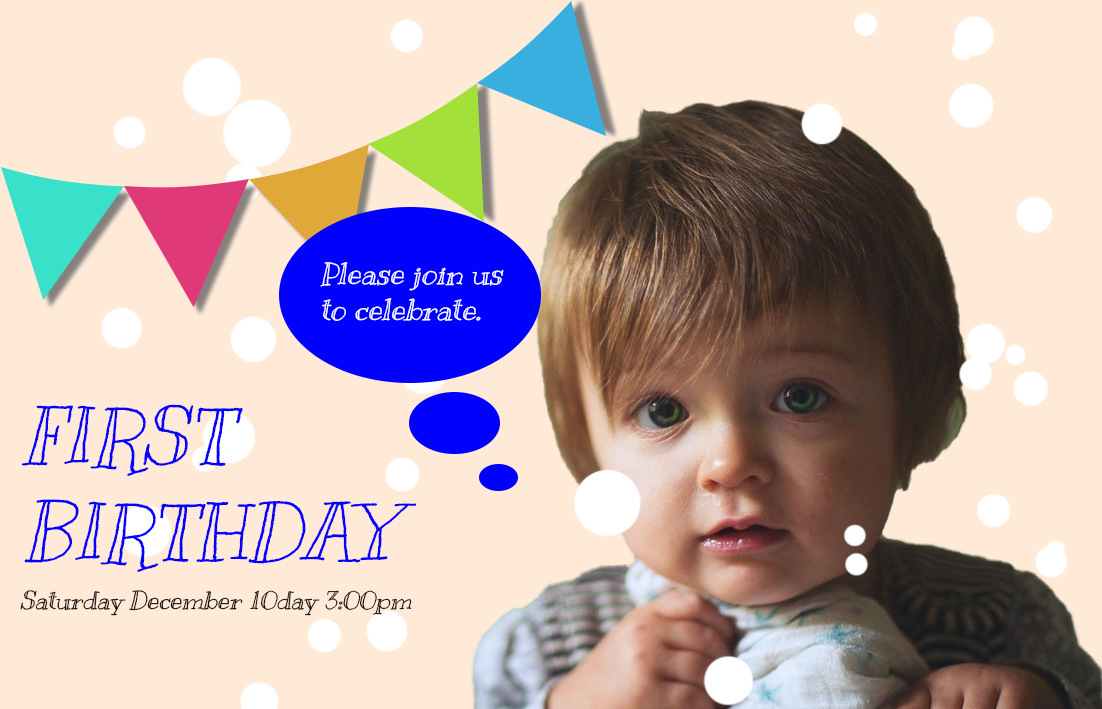
<style>
.page{position:relative;width:1102px;height:709px;background:#ffead8}
.page>*{position:absolute;margin:0}
.t1{font:30px "Kranky-Regular";color:#ffffff;font-style:italic}
.t2{font:80px "Kranky-Regular";color:#0600ff;font-style:italic}
.t3{font:25px "Kranky-Regular";color:#000000;font-style:italic}
</style>
<div class="page">
<p class="t1" style="left:320px;top:262px;width:184px;height:59px">Please join us<br>to celebrate.</p>
<p class="t2" style="left:21px;top:404px;width:395px;height:168px">FIRST<br>BIRTHDAY</p>
<p class="t3" style="left:20px;top:590px;width:392px;height:26px">Saturday December 10day 3:00pm</p>
</div>
